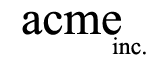
<style>
.page{position:relative;width:150px;height:58px;background:#ffffff}
.page>*{position:absolute;margin:0}
.t1{font:48px "TimesNewRomanPSMT";color:#000000}
.t2{font:24px "TimesNewRomanPSMT";color:#000000}
</style>
<div class="page">
<p class="t1" style="left:22px;top:11px;width:99px;height:24px">acme</p>
<p class="t2" style="left:112px;top:37px;width:34px;height:18px">inc.</p>
</div>
